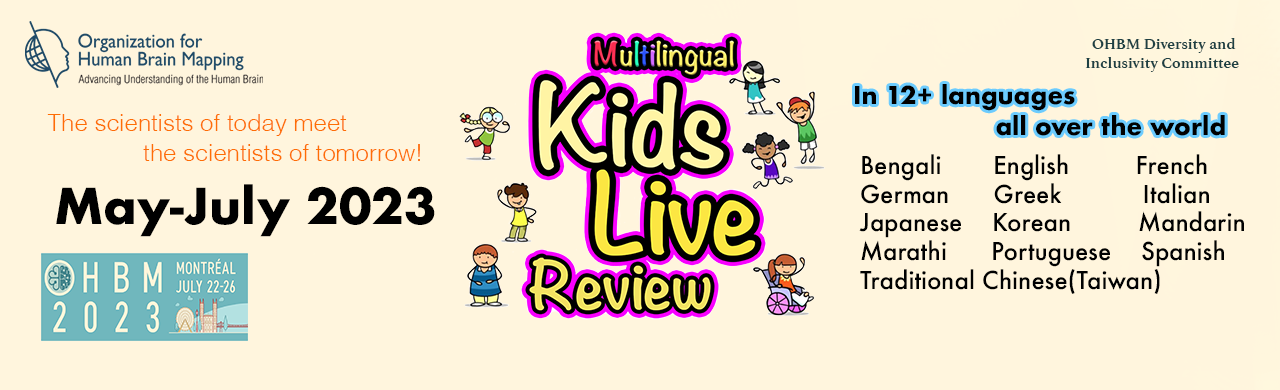
<style>
.page{position:relative;width:1280px;height:390px;background:#fff5dd}
.page>*{position:absolute;margin:0}
.t1{font:16px "Athelas-Bold";color:#1e4043}
.t2{font:24px "Futura-Bold";color:#000000}
.t3{font:24px "Helvetica-Light";color:#fe6e04}
.t4{font:24px "Futura-Bold";color:#000101}
.t5{font:24px "Futura-Medium";color:#000101}
.t6{font:48px "Futura-Bold";color:#000000}
</style>
<div class="page">
<p class="t1" style="left:1085px;top:38px;width:154px;height:34px">OHBM Diversity and <br>Inclusivity Committee</p>
<p class="t2" style="left:855px;top:84px;width:220px;height:27px">In 12+ languages</p>
<p class="t3" style="left:47px;top:114px;width:300px;height:22px">The scientists of today meet</p>
<p class="t4" style="left:996px;top:115px;width:229px;height:21px">all over the world</p>
<p class="t3" style="left:143px;top:144px;width:277px;height:17px">the scientists of tomorrow!</p>
<p class="t5" style="left:859px;top:154px;width:385px;height:140px">Bengali       English         French<br>German      Greek           Italian<br>Japanese    Korean         Mandarin<br>Marathi      Portuguese    Spanish<br>Traditional Chinese(Taiwan)</p>
<p class="t6" style="left:56px;top:184px;width:379px;height:53px">May-July 2023</p>
</div>
